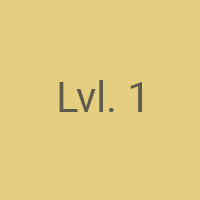
<style>
.page{position:relative;width:200px;height:200px;background:#e5ce7f}
.page>*{position:absolute;margin:0}
.t1{font:41.7px "Roboto-Regular";color:#5e5a4c}
</style>
<div class="page">
<p class="t1" style="left:59px;top:80px;width:83px;height:32px">Lvl. 1</p>
</div>
